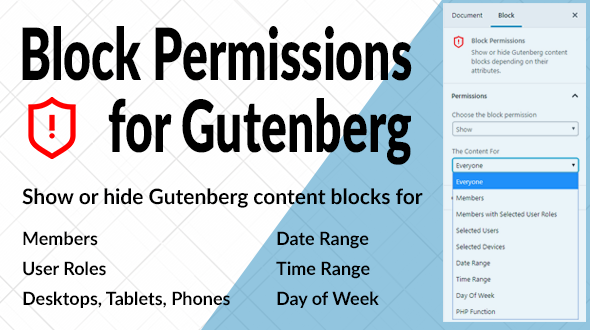
<style>
.page{position:relative;width:590px;height:330px}
.page>*{position:absolute;margin:0}
.t1{font:72px/72px "Lato-Black";color:#000000;scale:0.67 1}
.t2{font:21px "Lato-Bold";color:#000000}
.t3{font:18px/30px "Lato-Bold";color:#000000}
</style>
<div class="page">
<p class="t1" style="left:22px;top:26px;width:390px;height:139px">Block Permissions<br>        for Gutenberg</p>
<p class="t2" style="left:22px;top:188px;width:401px;height:20px">Show or hide Gutenberg content blocks for</p>
<p class="t3" style="left:23px;top:231px;width:207px;height:77px">Members<br>User Roles<br>Desktops, Tablets, Phones</p>
<p class="t3" style="left:276px;top:231px;width:103px;height:77px">Date Range<br>Time Range<br>Day of Week</p>
</div>
